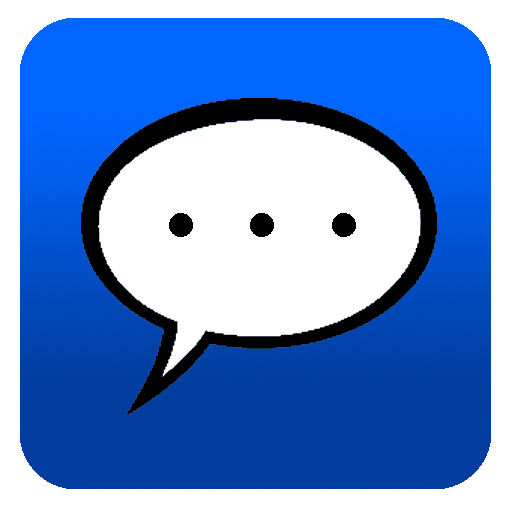
<style>
.page{position:relative;width:512px;height:512px;background:#ffffff}
.page>*{position:absolute;margin:0}
.t1{font:145.9px "Consolas";letter-spacing:0.01em;color:#000000}
</style>
<div class="page">
<p class="t1" style="left:169px;top:213px;width:187px;height:24px">...</p>
</div>
